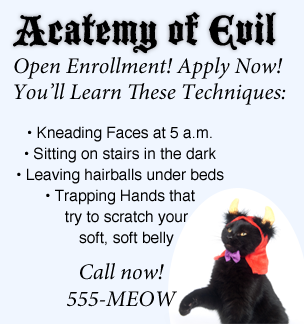
<style>
.page{position:relative;width:304px;height:324px;background:#f0f6ff}
.page>*{position:absolute;margin:0}
.t1{font:45px "BlackmoorLetPlain";color:#000000}
.t2{font:22.5px "MinionPro-It";color:#000000}
.t3{font:15.5px/21px "Helvetica";color:#000000}
</style>
<div class="page">
<p class="t1" style="left:13px;top:12px;width:263px;height:42px">Acatemy of Evil</p>
<p class="t2" style="left:14px;top:57px;width:269px;height:22px">Open Enrollment! Apply Now!</p>
<p class="t2" style="left:14px;top:83px;width:272px;height:22px">You’ll Learn These Techniques:</p>
<p class="t3" style="left:17px;top:126px;width:207px;height:121px;text-align:center">• Kneading Faces at 5 a.m.<br>• Sitting on stairs in the dark<br>• Leaving hairballs under beds<br>• Trapping Hands that<br>   try to scratch your<br>   soft, soft belly</p>
<p class="t2" style="left:67px;top:263px;width:110px;height:44px;text-align:center">Call now!<br>555-MEOW</p>
</div>
